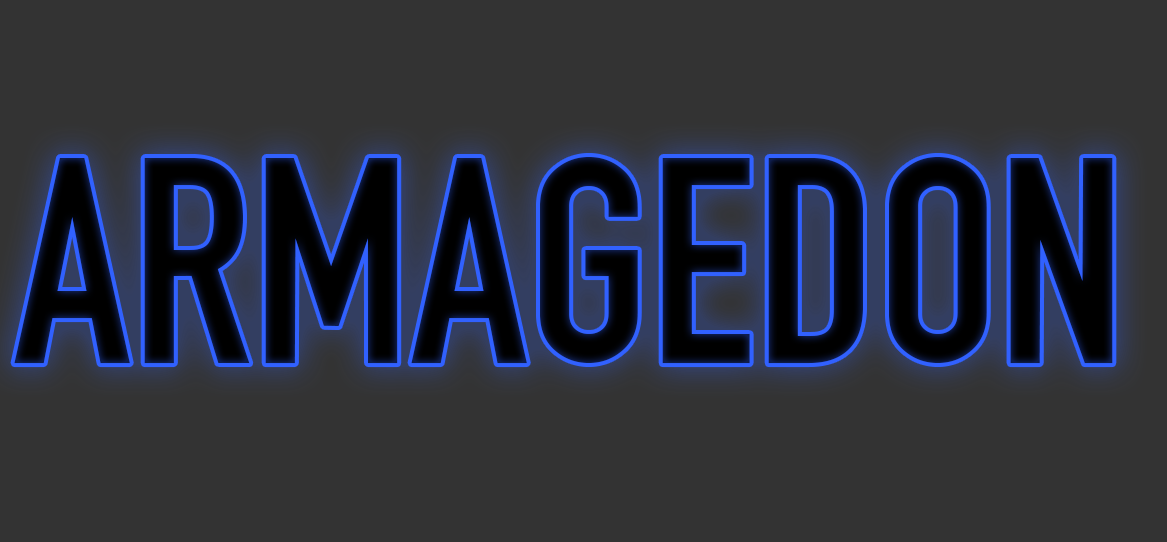
<style>
.page{position:relative;width:1167px;height:542px;background:#333333}
.page>*{position:absolute;margin:0}
.t1{font:285.8px "DINEngschrift";color:#010205}
</style>
<div class="page">
<p class="t1" style="left:14px;top:157px;width:1099px;height:207px">ARMAGEDON</p>
</div>
